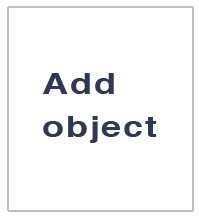
<style>
.page{position:relative;width:199px;height:217px;background:#ffffff}
.page>*{position:absolute;margin:0}
.t1{font:28.8px "Helvetica-Bold";letter-spacing:0.05em;color:#2d3956;scale:1.25 1}
</style>
<div class="page">
<p class="t1" style="left:42px;top:73px;width:115px;height:70px">Add<br>object</p>
</div>
